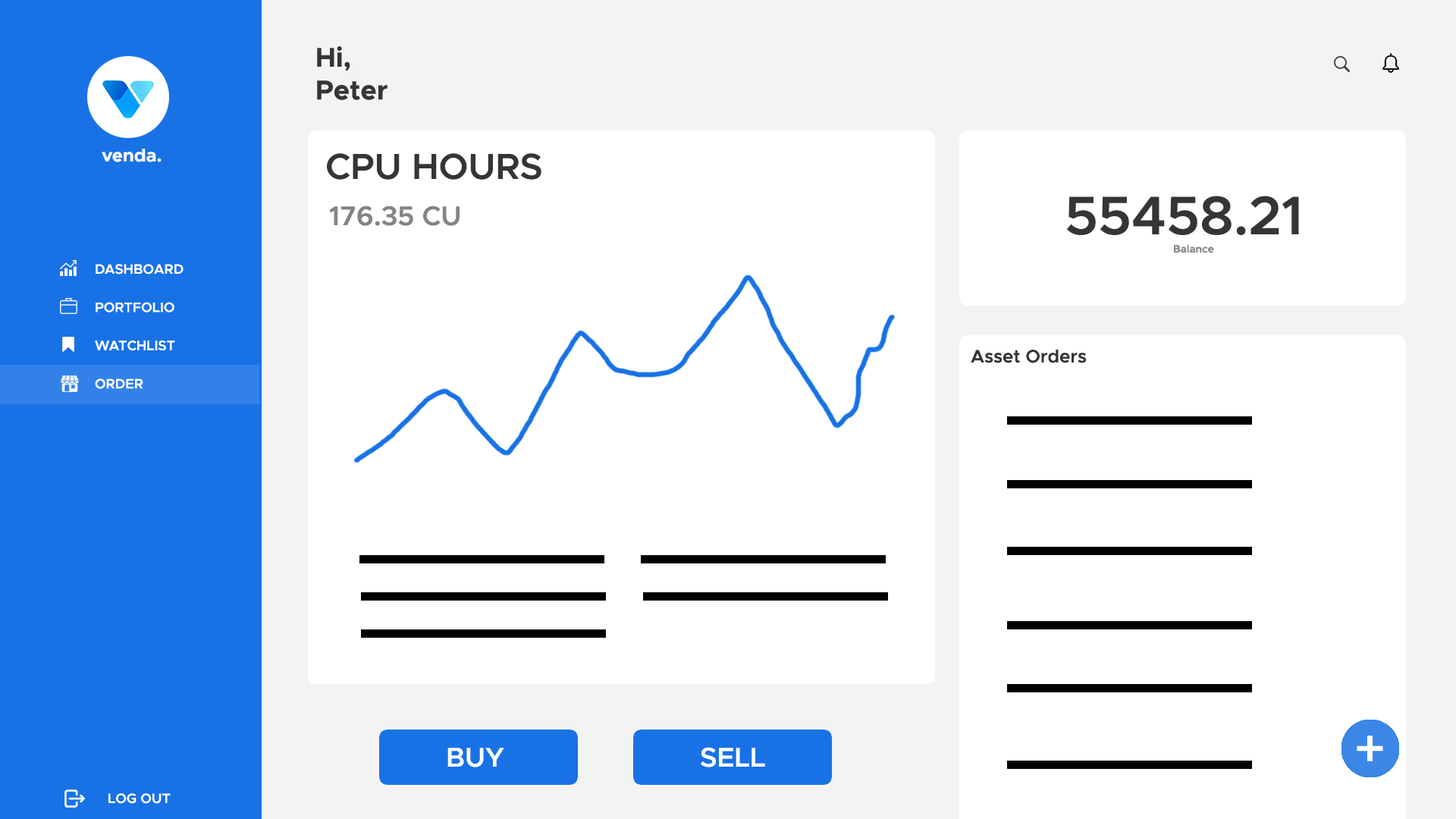
<style>
.page{position:relative;width:1456px;height:819px;background:#ffffff}
.page>*{position:absolute;margin:0}
.t1{font:27.3px "Metropolis-Bold";color:#353536}
.t2{font:18.2px "Metropolis-Bold";color:#ffffff}
.t3{font:36.4px "Metropolis-SemiBold";color:#353536}
.t4{font:54.6px "Metropolis-SemiBold";color:#353536}
.t5{font:27.3px "Metropolis-SemiBold";color:#848484}
.t6{font:10.6px "Metropolis-SemiBold";color:#848484}
.t7{font:13.6px "Metropolis-SemiBold";color:#ffffff}
.t8{font:18.2px "Metropolis-SemiBold";color:#353536}
.t9{font:54.6px "Metropolis-Medium";color:#ffffff}
.t10{font:27.3px "Metropolis-SemiBold";color:#ffffff}
</style>
<div class="page">
<p class="t1" style="left:317px;top:46px;width:71px;height:54px">Hi,<br>Peter</p>
<p class="t2" style="left:102px;top:149px;width:60px;height:13px">venda.</p>
<p class="t3" style="left:327px;top:153px;width:214px;height:27px">CPU HOURS</p>
<p class="t4" style="left:1067px;top:196px;width:232px;height:39px">55458.21</p>
<p class="t5" style="left:329px;top:206px;width:131px;height:20px">176.35 CU</p>
<p class="t6" style="left:1174px;top:245px;width:40px;height:8px">Balance</p>
<p class="t7" style="left:95px;top:264px;width:89px;height:125px">DASHBOARD<br><br>PORTFOLIO<br><br>WATCHLIST<br><br>ORDER</p>
<p class="t8" style="left:971px;top:350px;width:116px;height:13px">Asset Orders</p>
<p class="t9" style="left:1357px;top:736px;width:26px;height:25px">+</p>
<p class="t10" style="left:447px;top:748px;width:57px;height:19px">BUY</p>
<p class="t10" style="left:701px;top:747px;width:64px;height:20px">SELL</p>
<p class="t7" style="left:108px;top:793px;width:63px;height:11px">LOG OUT</p>
</div>
